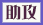
<style>
.page{position:relative;width:43px;height:25px;background:#f9faf3}
.page>*{position:absolute;margin:0}
.t1{font:16px "DFYaSongW9";color:#4d2241}
</style>
<div class="page">
<p class="t1" style="left:5px;top:4px;width:32px;height:16px">助攻</p>
</div>
